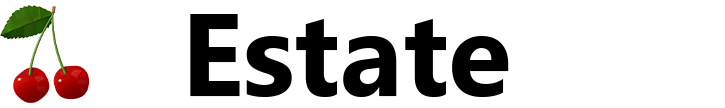
<style>
.page{position:relative;width:725px;height:108px;background:#ffffff}
.page>*{position:absolute;margin:0}
.t1{font:116.7px "MicrosoftNewTaiLue-Bold";color:#000000}
</style>
<div class="page">
<p class="t1" style="left:190px;top:14px;width:319px;height:83px">Estate</p>
</div>
